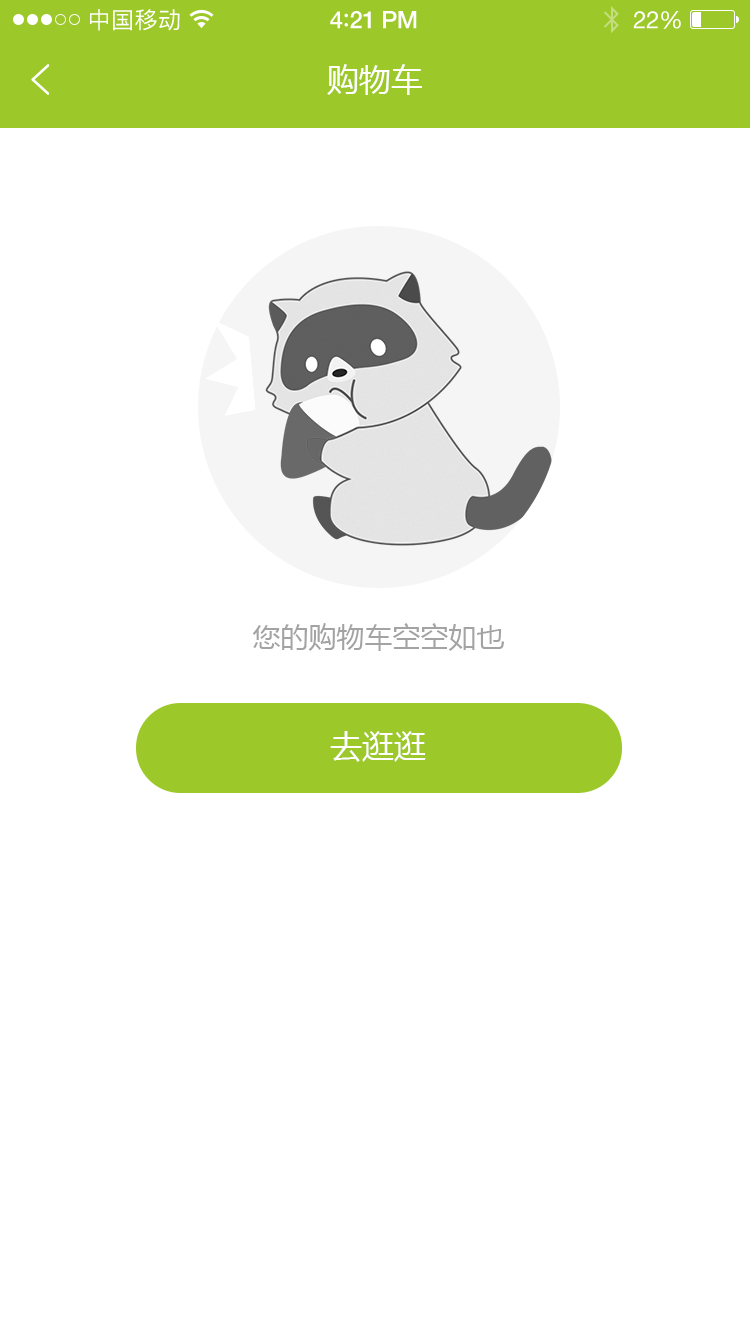
<style>
.page{position:relative;width:750px;height:1334px;background:#ffffff}
.page>*{position:absolute;margin:0}
.t1{font:23px "PingFangSC-Regular";letter-spacing:0.02em;color:#ffffff}
.t2{font:24px "HelveticaNeue-Medium";letter-spacing:-0.02em;color:#ffffff}
.t3{font:26px "Avenir-Medium";letter-spacing:-0.02em;color:#ffffff}
.t4{font:24px "HelveticaNeue";letter-spacing:-0.02em;color:#ffffff}
.t5{font:32px "MicrosoftYaHei";color:#ffffff;text-transform:uppercase}
.t6{font:28px "MicrosoftYaHei";color:#a3a3a3;text-transform:uppercase}
</style>
<div class="page">
<p class="t1" style="left:90px;top:9px;width:90px;height:22px">中国移动</p>
<p class="t2" style="left:330px;top:11px;width:87px;height:18px">4<span class="t3">:</span>21 PM</p>
<p class="t4" style="left:633px;top:11px;width:48px;height:18px">22%</p>
<p class="t5" style="left:327px;top:64px;width:95px;height:31px">购物车</p>
<p class="t6" style="left:252px;top:623px;width:253px;height:28px">您的购物车空空如也</p>
<p class="t5" style="left:330px;top:731px;width:96px;height:31px">去逛逛</p>
</div>
